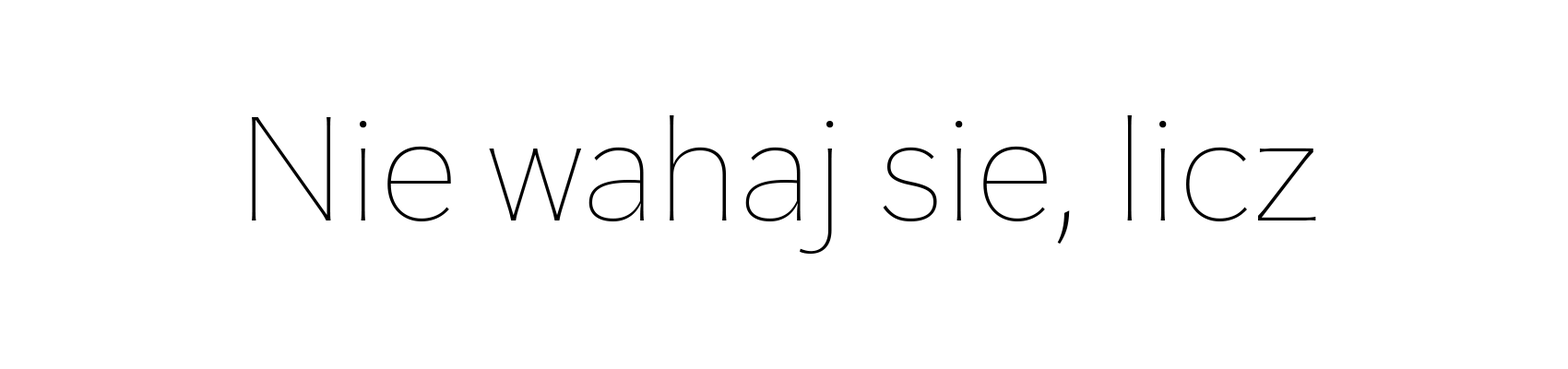
<style>
.page{position:relative;width:1568px;height:369px;background:#ffffff}
.page>*{position:absolute;margin:0}
.t1{font:138.4px "HiraginoSans-W0";color:#000000}
</style>
<div class="page">
<p class="t1" style="left:252px;top:115px;width:1064px;height:139px">Nie wahaj sie, licz</p>
</div>
